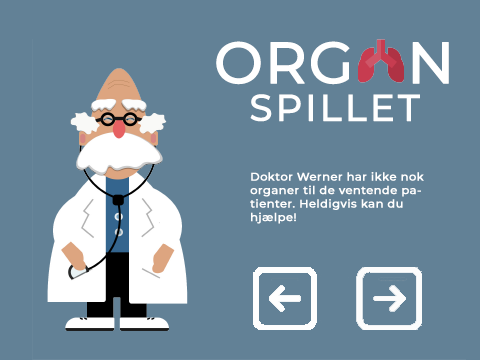
<style>
.page{position:relative;width:480px;height:360px;background:#628196}
.page>*{position:absolute;margin:0}
.t1{font:58.3px "Montserrat-Medium";color:#ffffff;font-weight:bold}
.t2{font:37.5px "Montserrat-Medium";letter-spacing:0.05em;color:#ffffff;font-weight:bold}
.t3{font:11.2px "Montserrat-Medium";letter-spacing:0.025em;color:#ffffff;font-weight:bold}
</style>
<div class="page">
<p class="t1" style="left:216px;top:41px;width:233px;height:44px">ORG   N</p>
<p class="t2" style="left:250px;top:94px;width:170px;height:28px">SPILLET</p>
<p class="t3" style="left:250px;top:172px;width:174px;height:52px">Doktor Werner har ikke nok organer til de ventende pa- tienter. Heldigvis kan du hjælpe!</p>
</div>
